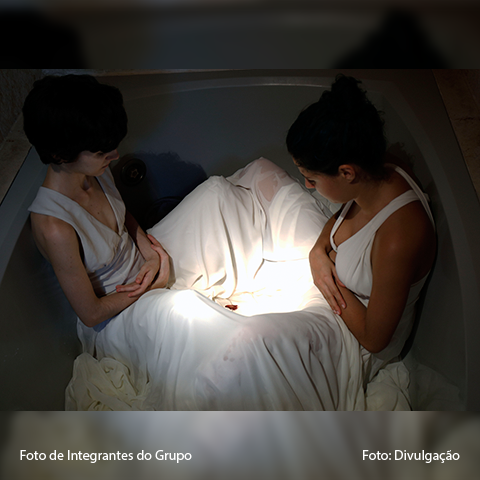
<style>
.page{position:relative;width:480px;height:480px}
.page>*{position:absolute;margin:0}
.t1{font:14px "MyriadPro-Regular";color:#ffffff}
</style>
<div class="page">
<p class="t1" style="left:20px;top:450px;width:172px;height:13px">Foto de Integrantes do Grupo</p>
<p class="t1" style="left:363px;top:450px;width:97px;height:13px">Foto: Divulgação</p>
</div>
